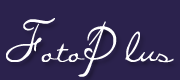
<style>
.page{position:relative;width:180px;height:80px;background:#2b224d}
.page>*{position:absolute;margin:0}
.t1{font:50px "MissBrooks";color:#ffffff}
</style>
<div class="page">
<p class="t1" style="left:6px;top:18px;width:168px;height:59px">FotoPlus</p>
</div>
